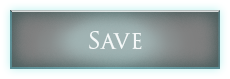
<style>
.page{position:relative;width:230px;height:79px}
.page>*{position:absolute;margin:0}
.t1{font:24px "TrajanPro3-Regular";color:#f1f1f1}
</style>
<div class="page">
<p class="t1" style="left:89px;top:31px;width:53px;height:18px">Save</p>
</div>
